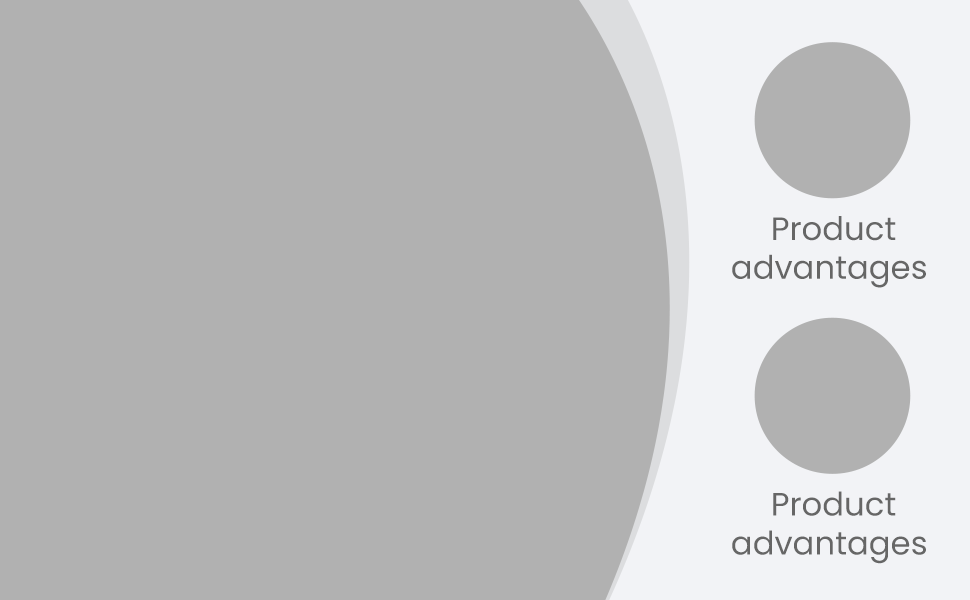
<style>
.page{position:relative;width:970px;height:600px;background:#b1b1b1}
.page>*{position:absolute;margin:0}
.t1{font:32.3px "Poppins-Regular";color:#666666}
</style>
<div class="page">
<p class="t1" style="left:732px;top:216px;width:194px;height:72px;text-align:center">Product<br>advantages</p>
<p class="t1" style="left:732px;top:491px;width:194px;height:73px;text-align:center">Product<br>advantages</p>
</div>
